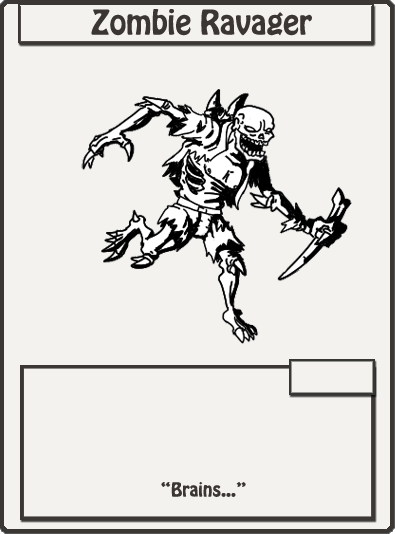
<style>
.page{position:relative;width:395px;height:534px;background:#f3f2ee}
.page>*{position:absolute;margin:0}
.t1{font:30px "HoboStd";color:#3b3634}
.t2{font:17px "HoboStd";color:#3b3634}
</style>
<div class="page">
<p class="t1" style="left:91px;top:9px;width:221px;height:27px">Zombie Ravager</p>
<p class="t2" style="left:161px;top:482px;width:85px;height:15px">“Brains...”</p>
</div>
